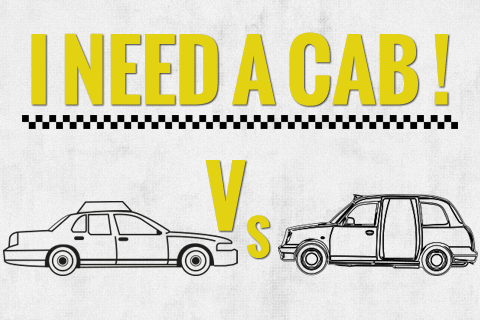
<style>
.page{position:relative;width:480px;height:320px}
.page>*{position:absolute;margin:0}
.t1{font:80px "Oswald-Bold";color:#e3d212}
</style>
<div class="page">
<p class="t1" style="left:31px;top:32px;width:418px;height:74px">I NEED A CAB !</p>
<p class="t1" style="left:205px;top:160px;width:65px;height:98px">VS</p>
</div>
